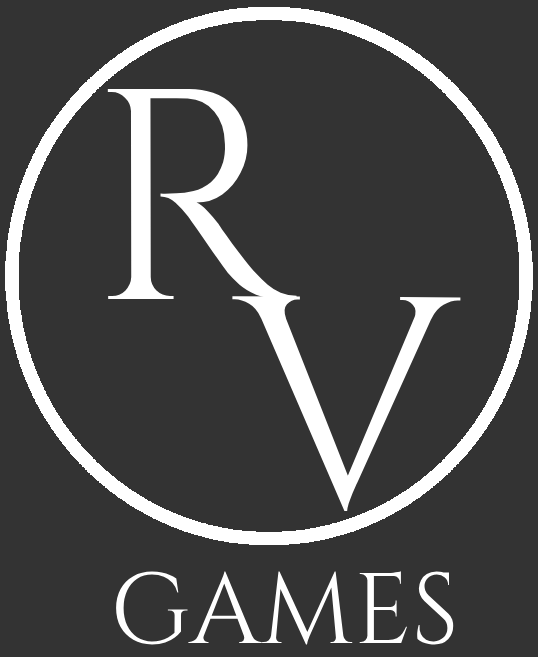
<style>
.page{position:relative;width:538px;height:657px;background:#333333}
.page>*{position:absolute;margin:0}
.t1{font:300px "Cinzel-Regular";color:#ffffff}
.t2{font:100px "Cinzel-Regular";color:#ffffff}
</style>
<div class="page">
<p class="t1" style="left:107px;top:88px;width:190px;height:212px">R</p>
<p class="t1" style="left:232px;top:296px;width:229px;height:216px">V</p>
<p class="t2" style="left:116px;top:571px;width:338px;height:74px">GAMES</p>
</div>
